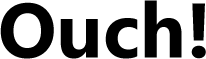
<style>
.page{position:relative;width:206px;height:59px;background:#ffffff}
.page>*{position:absolute;margin:0}
.t1{font:76.9px "Ebrima-Bold";color:#000000}
</style>
<div class="page">
<p class="t1" style="left:0px;top:0px;width:206px;height:59px">Ouch!</p>
</div>
